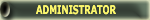
<style>
.page{position:relative;width:150px;height:20px}
.page>*{position:absolute;margin:0}
.t1{font:12px "Verdana-Bold";color:#fcf76d;scale:0.68 1}
</style>
<div class="page">
<p class="t1" style="left:36px;top:5px;width:80px;height:10px">ADMINISTRATOR</p>
</div>
